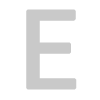
<style>
.page{position:relative;width:100px;height:100px;background:#ffffff}
.page>*{position:absolute;margin:0}
.t1{font:107px "Roboto-Regular";letter-spacing:-0.08em;color:#c9c9c9;font-weight:bold}
</style>
<div class="page">
<p class="t1" style="left:26px;top:9px;width:51px;height:81px">E</p>
</div>
